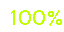
<style>
.page{position:relative;width:64px;height:32px;background:#ffffff}
.page>*{position:absolute;margin:0}
.t1{font:24px "Vrinda";color:#c0ff00}
</style>
<div class="page">
<p class="t1" style="left:11px;top:10px;width:51px;height:16px">100%</p>
</div>
